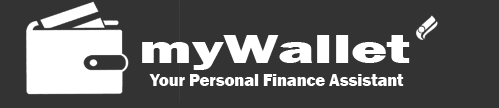
<style>
.page{position:relative;width:499px;height:108px;background:#333333}
.page>*{position:absolute;margin:0}
.t1{font:41.7px "FranklinGothic-Heavy";color:#ffffff;scale:1.49 1}
.t2{font:16.7px "FranklinGothic-Heavy";color:#ffffff}
</style>
<div class="page">
<p class="t1" style="left:142px;top:35px;width:268px;height:35px">myWallet</p>
<p class="t2" style="left:149px;top:74px;width:255px;height:12px">Your Personal Finance Assistant</p>
</div>
